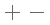
<style>
.page{position:relative;width:50px;height:25px;background:#ffffff}
.page>*{position:absolute;margin:0}
.t1{font:47px "Raleway-Thin";color:#666666}
</style>
<div class="page">
<p class="t1" style="left:5px;top:5px;width:15px;height:15px">+</p>
</div>
